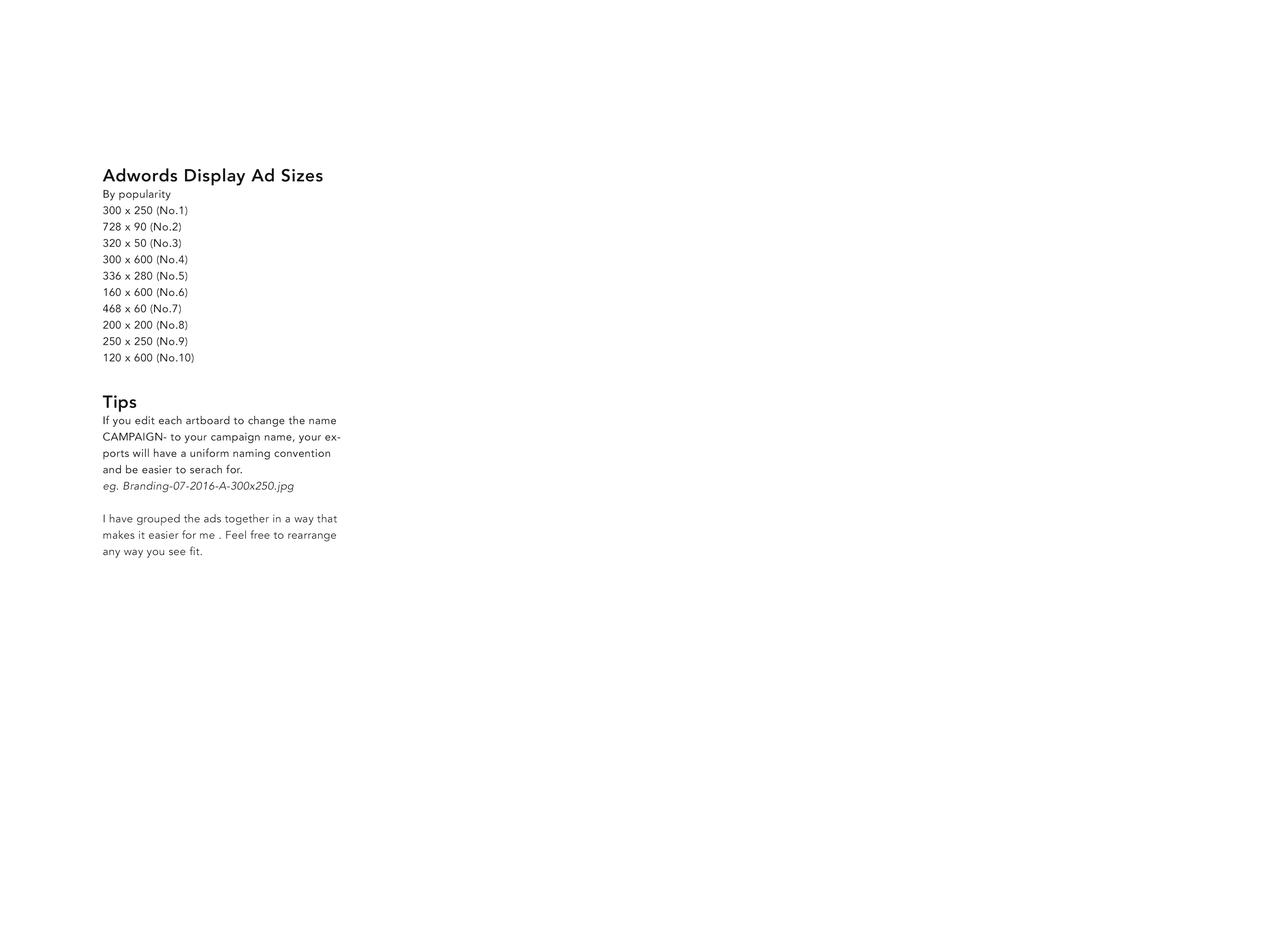
<style>
.page{position:relative;width:1280px;height:931px;background:#ffffff}
.page>*{position:absolute;margin:0}
.t1{font:10.9px/16.4px "Avenir-Roman";letter-spacing:0.025em;color:#131313}
.t2{font:17.3px/16.4px "Avenir-Heavy";letter-spacing:0.025em;color:#131313}
.t3{font:10.9px/16.4px "Avenir-BookOblique";letter-spacing:0.025em;color:#131313}
.t4{font:10.9px/16.4px "Avenir-Book";letter-spacing:0.025em;color:#131313}
</style>
<div class="page">
<p class="t1" style="left:103px;top:168px;width:220px;height:195px"><span class="t2">Adwords Display Ad Sizes<br></span>By popularity<br>300 x 250 (No.1)<br>728 x 90 (No.2)<br>320 x 50 (No.3)<br>300 x 600 (No.4)<br>336 x 280 (No.5)<br>160 x 600 (No.6)<br>468 x 60 (No.7)<br>200 x 200 (No.8)<br>250 x 250 (No.9)<br>120 x 600 (No.10)</p>
<p class="t1" style="left:103px;top:395px;width:238px;height:163px"><span class="t2">Tips<br></span>If you edit each artboard to change the name CAMPAIGN- to your campaign name, your exports will have a uniform naming convention and be easier to serach for. <br><span class="t3">eg. Branding-07-2016-A-300x250.jpg<br><br></span><span class="t4">I have grouped the ads together in a way that makes it easier for me . Feel free to rearrange any way you see fit.</span></p>
</div>
